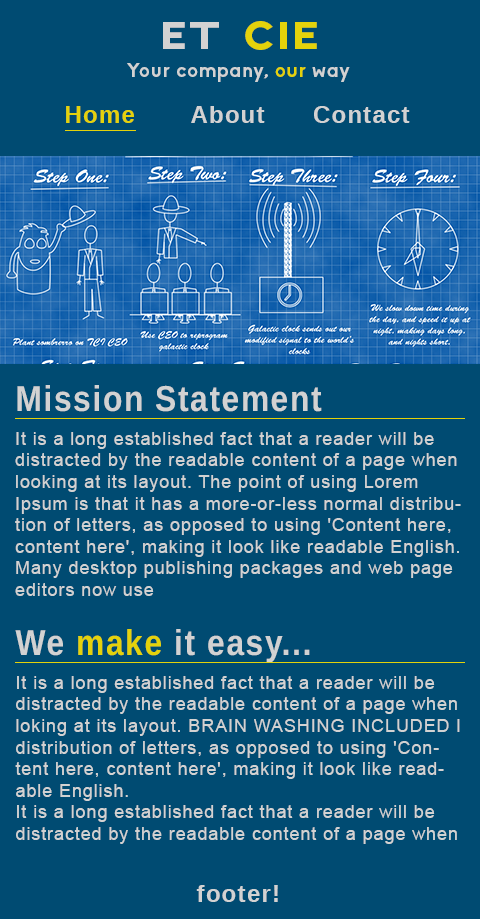
<style>
.page{position:relative;width:480px;height:919px;background:#004b72}
.page>*{position:absolute;margin:0}
.t1{font:41.8px "Axis";letter-spacing:0.05em;color:#e4d20b;scale:1.06 1}
.t2{font:41.8px "Axis";letter-spacing:0.05em;color:#d2d2d2;scale:1.06 1}
.t3{font:20px "Biko-Bold";letter-spacing:0.05em;color:#d2d2d2}
.t4{font:20px "Biko-Bold";letter-spacing:0.05em;color:#e4d20b}
.t5{font:24px "Arimo-Bold";letter-spacing:0.05em;color:#d2d2d2}
.t6{font:24px "Arimo-Bold";letter-spacing:0.05em;color:#e4d20b}
.t7{font:36px "Arimo-Bold";letter-spacing:0.05em;color:#d2d2d2;scale:0.88 1}
.t8{font:18px "ArialMT";letter-spacing:0.05em;color:#d2d2d2}
.t9{font:36px "Arimo-Bold";letter-spacing:0.05em;color:#e4d20b;scale:0.88 1}
</style>
<div class="page">
<p class="t1" style="left:163px;top:21px;width:154px;height:29px"><span class="t2">ET </span>CIE</p>
<p class="t3" style="left:127px;top:63px;width:223px;height:19px">Your company, <span class="t4">our</span> way</p>
<p class="t5" style="left:66px;top:106px;width:344px;height:17px"><span class="t6">Home</span>       About      Contact</p>
<p class="t7" style="left:17px;top:385px;width:305px;height:27px">Mission Statement</p>
<p class="t8" style="left:15px;top:432px;width:446px;height:164px">It is a long established fact that a reader will be distracted by the readable content of a page when looking at its layout. The point of using Lorem Ipsum is that it has a more-or-less normal distribution of letters, as opposed to using 'Content here, content here', making it look like readable English. Many desktop publishing packages and web page editors now use</p>
<p class="t7" style="left:15px;top:629px;width:295px;height:34px">We <span class="t9">make</span> it easy...</p>
<p class="t8" style="left:15px;top:676px;width:445px;height:168px">It is a long established fact that a reader will be distracted by the readable content of a page when loking at its layout. BRAIN WASHING INCLUDED l distribution of letters, as opposed to using 'Content here, content here', making it look like readable English. <br>It is a long established fact that a reader will be distracted by the readable content of a page when looking at its layout. The point of using Lorem Ipsum is that it has a more-or-less normal distribution of letters, as opposed to using 'Content here, content here', making it look like readable English. Many desktop publishing packages and web page editors now use</p>
<p class="t5" style="left:196px;top:885px;width:82px;height:17px">footer!</p>
</div>
